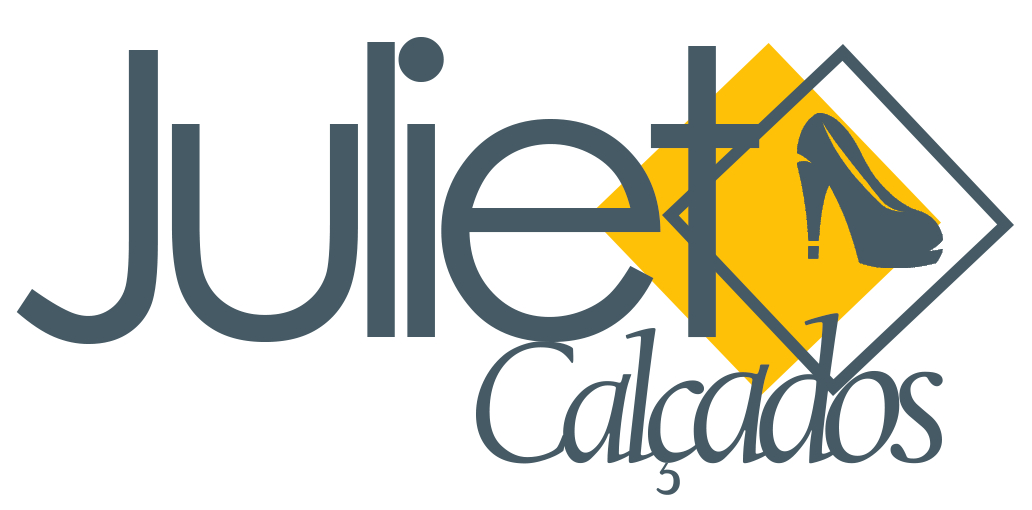
<style>
.page{position:relative;width:1032px;height:510px;background:#ffffff}
.page>*{position:absolute;margin:0}
.t1{font:400px "CenturyGothic";letter-spacing:-0.118em;color:#455a64}
.t2{font:400px "CenturyGothic";letter-spacing:-0.1em;color:#455a64}
.t3{font:180px "CalifornianFB-Italic";letter-spacing:-0.1em;color:#455a64}
.t4{font:200px "CalifornianFB-Italic";letter-spacing:-0.1em;color:#455a64}
</style>
<div class="page">
<p class="t1" style="left:16px;top:37px;width:744px;height:307px">Ju<span class="t2">li</span>et</p>
<p class="t3" style="left:476px;top:313px;width:467px;height:182px">Calç<span class="t4">ados</span></p>
</div>
